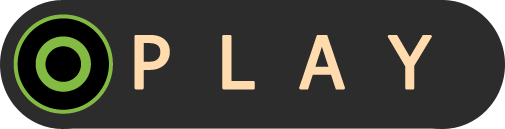
<style>
.page{position:relative;width:505px;height:129px;background:#2c2c2c}
.page>*{position:absolute;margin:0}
.t1{font:72px "Tahoma";letter-spacing:0.64em;color:#ffdbad;font-weight:bold}
</style>
<div class="page">
<p class="t1" style="left:134px;top:35px;width:298px;height:55px">PLAY</p>
</div>
